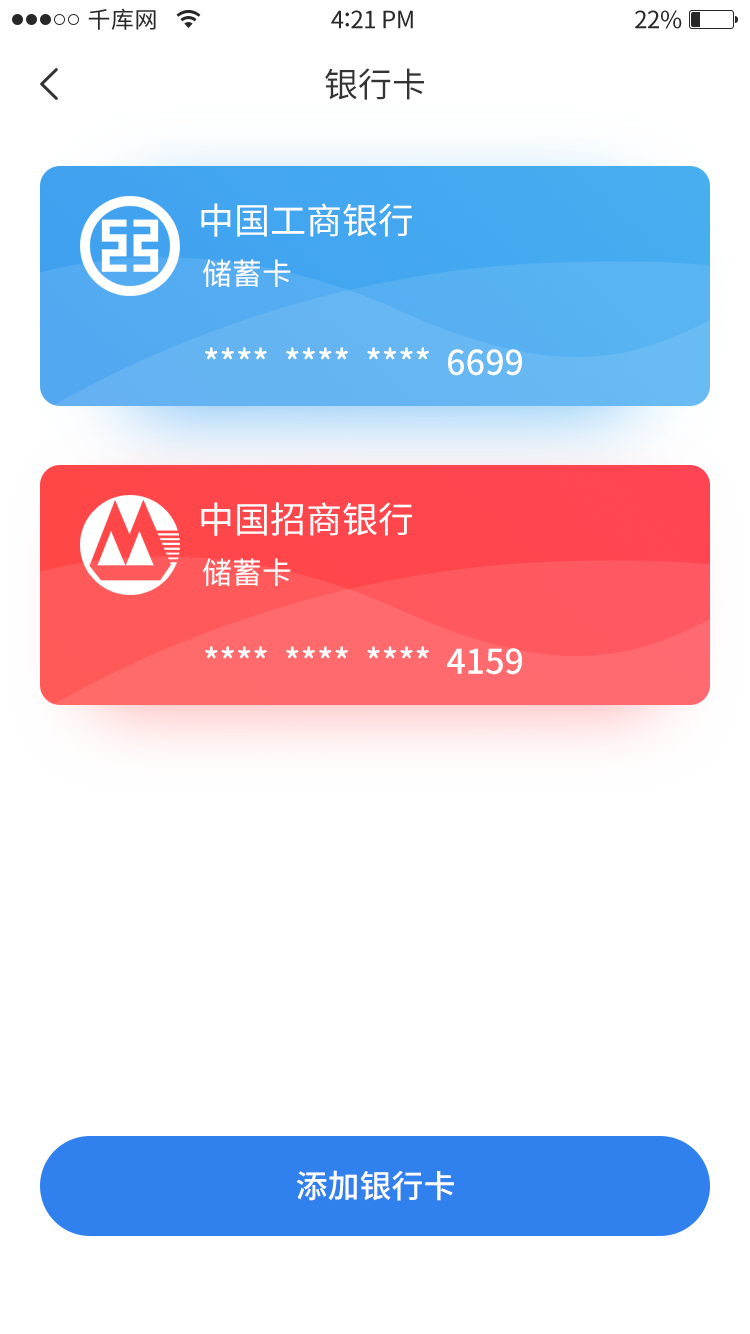
<style>
.page{position:relative;width:750px;height:1334px;background:#ffffff}
.page>*{position:absolute;margin:0}
.t1{font:34px "SourceHanSansCN-Regular";color:#333333}
.t2{font:36px "SourceHanSansCN-Regular";color:#fefefe}
.t3{font:30px "SourceHanSansCN-Regular";color:#fefefe}
.t4{font:34px "SourceHanSansCN-Medium";color:#fefefe}
.t5{font:32px "SourceHanSansCN-Medium";color:#ffffff}
</style>
<div class="page">
<p class="t1" style="left:325px;top:68px;width:99px;height:32px">银行卡</p>
<p class="t2" style="left:201px;top:203px;width:211px;height:34px">中国工商银行</p>
<p class="t3" style="left:202px;top:259px;width:89px;height:28px">储蓄卡</p>
<p class="t4" style="left:205px;top:347px;width:317px;height:29px">****  ****  ****  6699</p>
<p class="t2" style="left:201px;top:502px;width:211px;height:34px">中国招商银行</p>
<p class="t3" style="left:202px;top:558px;width:89px;height:28px">储蓄卡</p>
<p class="t4" style="left:205px;top:646px;width:317px;height:29px">****  ****  ****  4159</p>
<p class="t5" style="left:296px;top:1170px;width:158px;height:31px">添加银行卡</p>
</div>
